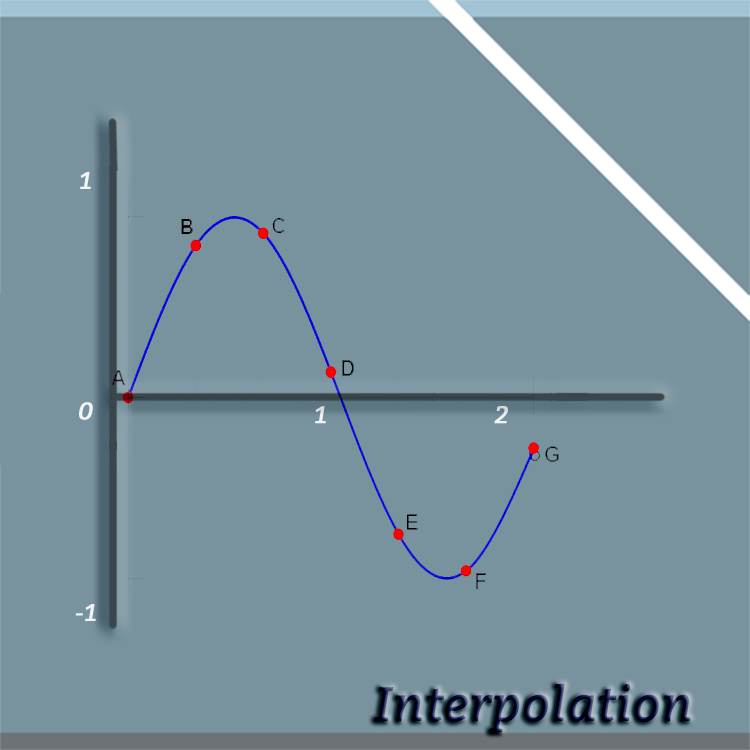
<style>
.page{position:relative;width:750px;height:750px;background:#78929e}
.page>*{position:absolute;margin:0}
.t1{font:24px "Bitter-Italic";color:#f3f4f6;font-weight:bold}
.t2{font:48px "Bitter-Italic";font-weight:bold}
</style>
<div class="page">
<p class="t1" style="left:75px;top:172px;width:21px;height:449px;text-align:center">1<br><br><br><br><br><br><br><br>0<br><br><br><br><br><br><br>-1</p>
<p class="t1" style="left:315px;top:406px;width:193px;height:18px">1     2</p>
<p class="t2" style="left:374px;top:683px;width:317px;height:50px">Interpolation</p>
</div>
